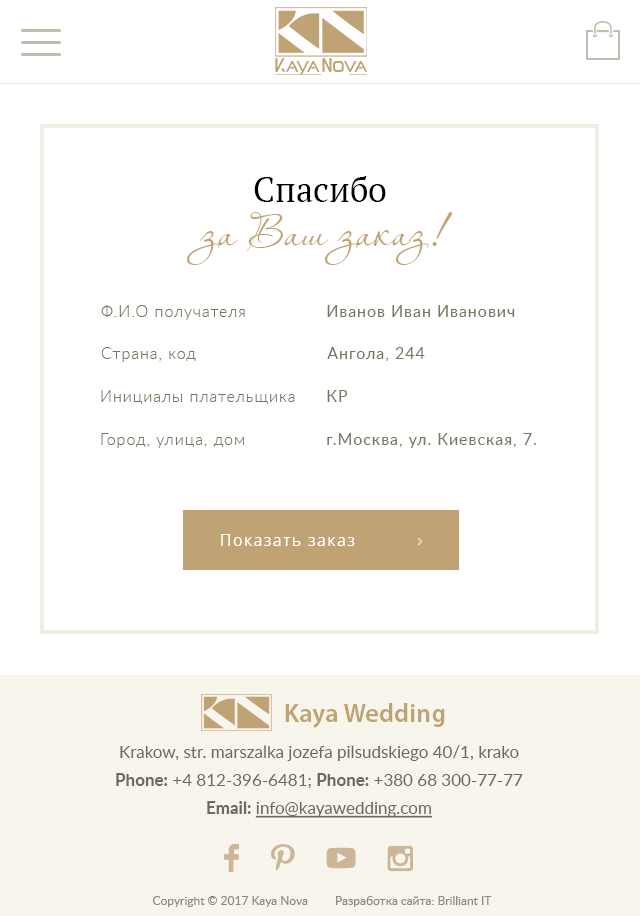
<style>
.page{position:relative;width:640px;height:916px;background:#ffffff}
.page>*{position:absolute;margin:0}
.t1{font:34.2px "PTSerif-Regular";color:#010101}
.t2{font:40.2px "Aquarelle";color:#c0a375}
.t3{font:16px "Lato-Light";letter-spacing:0.06em;color:#7b7460}
.t4{font:16px "Lato-Light";letter-spacing:0.06em;color:#7b7460;text-transform:uppercase}
.t5{font:16px "Lato-Regular";letter-spacing:0.06em;color:#7b7460}
.t6{font:16px "OpenSans";letter-spacing:0.07em;color:#ffffff}
.t7{font:26px "MyriadPro-Semibold";letter-spacing:0.01em;color:#c0a375}
.t8{font:17px/28px "Lato-Regular";color:#6c6964}
.t9{font:17px/28px "Lato-Bold";color:#6c6964}
.t10{font:17px/28px "Lato-Regular";color:#6c6964;text-decoration:underline}
.t11{font:12px "Lato-Regular";color:#8d8881}
</style>
<div class="page">
<p class="t1" style="left:254px;top:176px;width:132px;height:26px">Спасибо</p>
<p class="t2" style="left:187px;top:212px;width:266px;height:53px">за Ваш заказ!</p>
<p class="t3" style="left:101px;top:305px;width:144px;height:15px"><span class="t4">Ф.и.о</span> получателя</p>
<p class="t5" style="left:327px;top:305px;width:188px;height:12px">Иванов Иван Иванович</p>
<p class="t3" style="left:101px;top:347px;width:95px;height:15px">Страна, код</p>
<p class="t5" style="left:327px;top:347px;width:98px;height:14px">Ангола, 244</p>
<p class="t3" style="left:101px;top:390px;width:194px;height:14px">Инициалы плательщика</p>
<p class="t5" style="left:327px;top:390px;width:21px;height:12px">КР</p>
<p class="t3" style="left:101px;top:433px;width:143px;height:15px">Город, улица, дом</p>
<p class="t5" style="left:327px;top:433px;width:209px;height:15px">г.Москва, ул. Киевская, 7.</p>
<p class="t6" style="left:221px;top:534px;width:134px;height:12px">Показать заказ</p>
<p class="t7" style="left:285px;top:703px;width:160px;height:25px">Kaya Wedding</p>
<p class="t8" style="left:116px;top:745px;width:407px;height:73px;text-align:center">Krakow, str. marszalka jozefa pilsudskiego 40/1, krako<br><span class="t9">Phone:</span> +4 812-396-6481; <span class="t9">Phone:</span> +380 68 300-77-77<br><span class="t9">Email: </span><span class="t10">info@kayawedding.com</span></p>
<p class="t11" style="left:153px;top:896px;width:155px;height:11px">Copyright © 2017 Kaya Nova</p>
<p class="t11" style="left:336px;top:896px;width:156px;height:11px">Разработка сайта: Brilliant IT</p>
</div>
